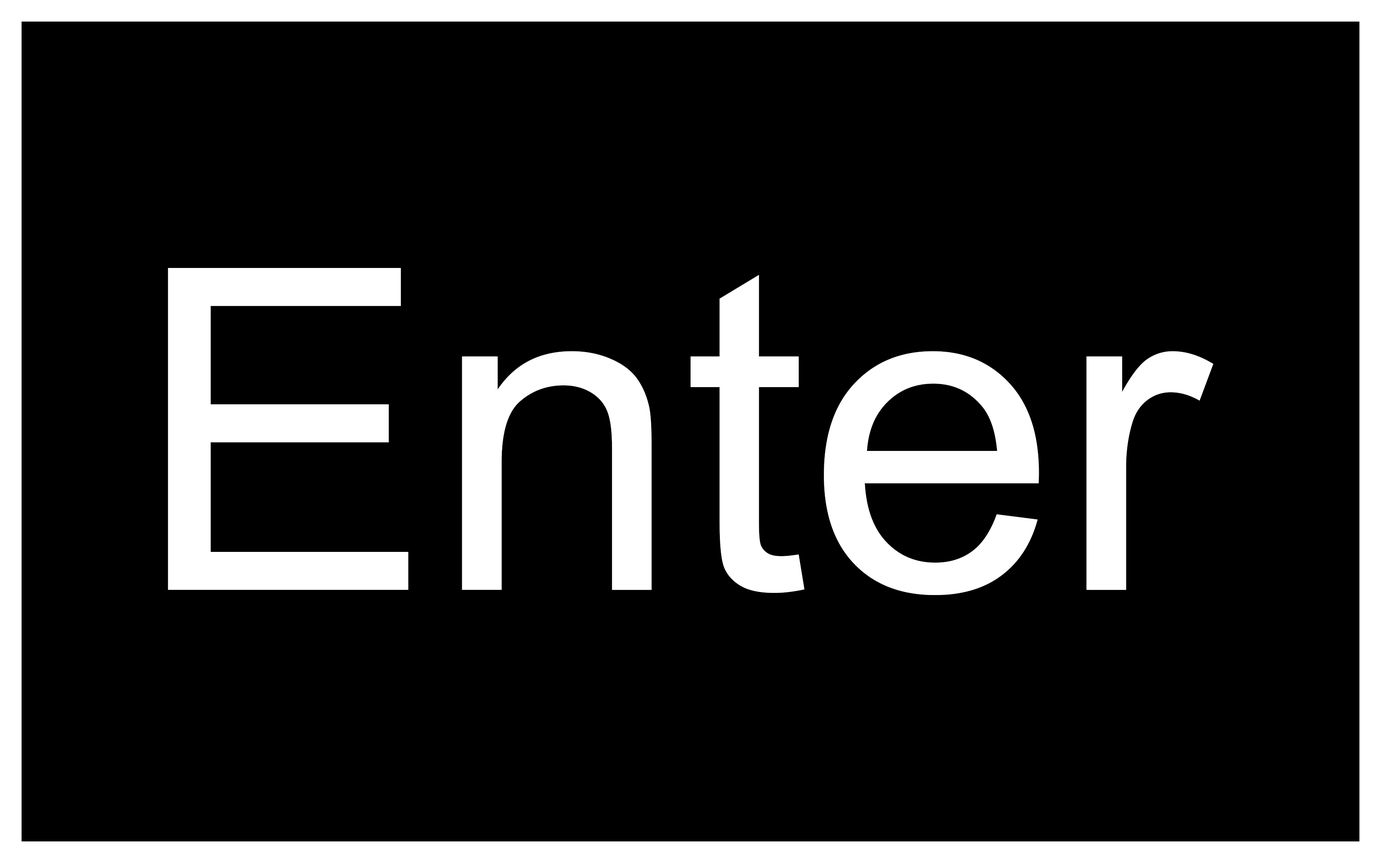
<style>
.page{position:relative;width:1381px;height:863px;background:#000000}
.page>*{position:absolute;margin:0}
.t1{font:449.6px "ArialMT";color:#ffffff}
</style>
<div class="page">
<p class="t1" style="left:168px;top:268px;width:1046px;height:327px">Enter</p>
</div>
